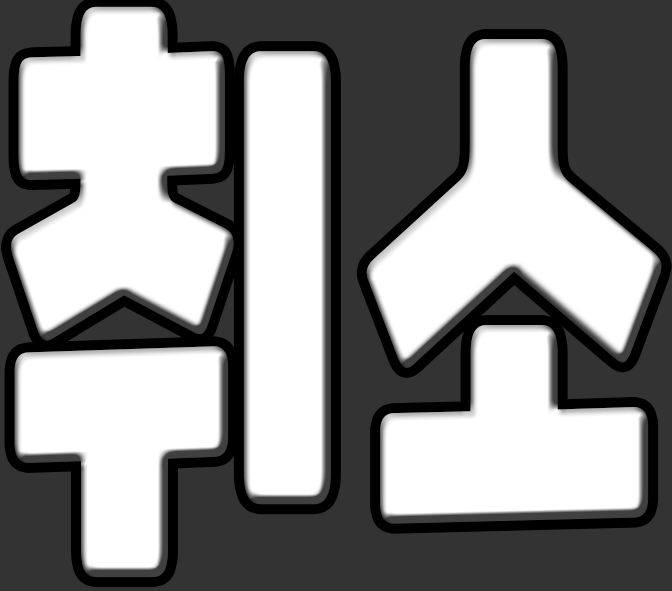
<style>
.page{position:relative;width:672px;height:591px;background:#ffffff}
.page>*{position:absolute;margin:0}
.t1{font:607.2px "CookieRunOTF-Black";color:#ffffff;scale:0.65 1}
</style>
<div class="page">
<p class="t1" style="left:11px;top:6px;width:651px;height:572px">취소</p>
</div>
